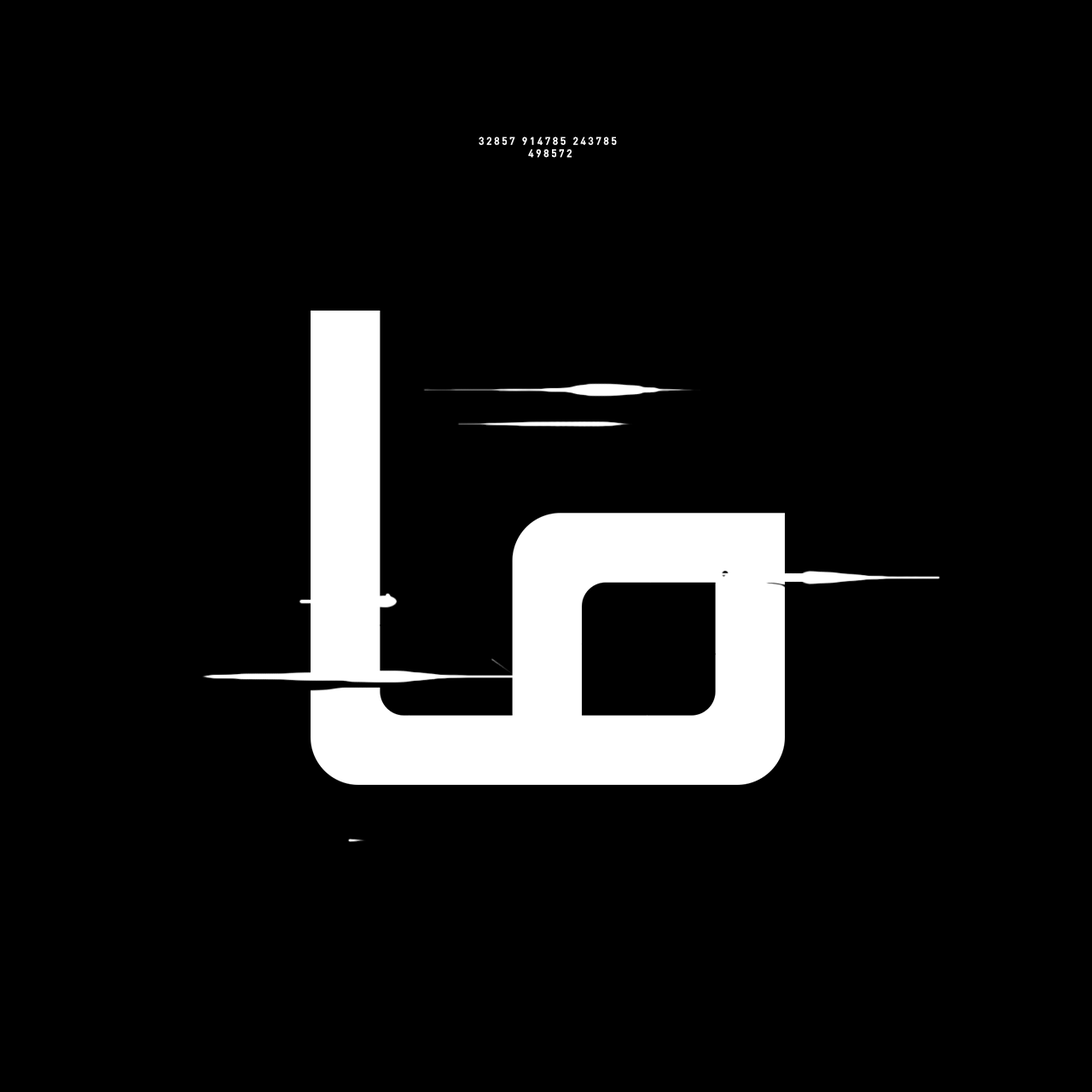
<style>
.page{position:relative;width:1092px;height:1092px;background:#000000}
.page>*{position:absolute;margin:0}
.t1{font:10.2px "DIN-Regular";letter-spacing:0.2em;color:#ffffff;font-weight:bold}
</style>
<div class="page">
<p class="t1" style="left:479px;top:136px;width:138px;height:22px;text-align:center">32857 914785 243785 <br>498572</p>
</div>
